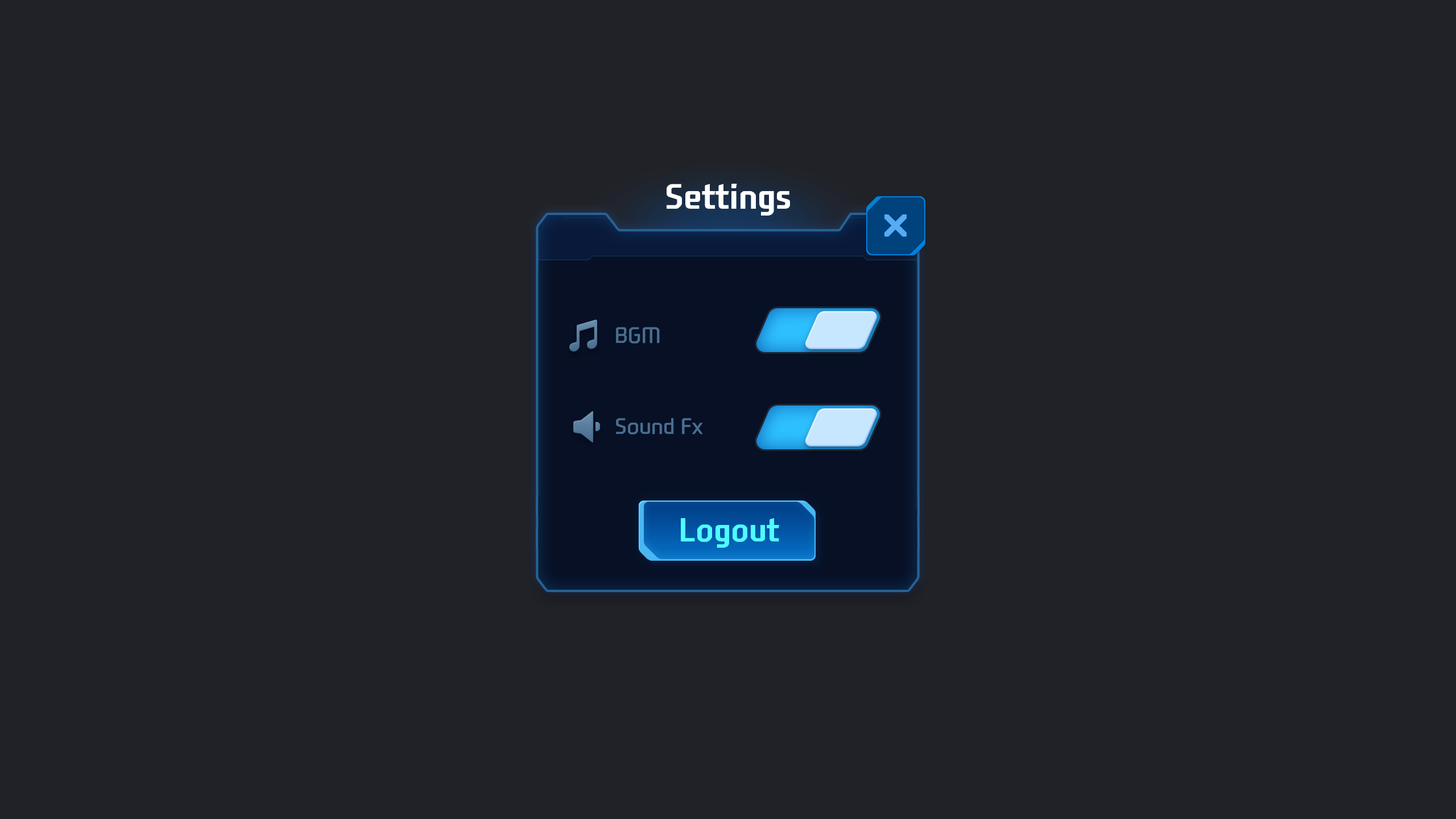
<style>
.page{position:relative;width:1456px;height:819px;background:#212227}
.page>*{position:absolute;margin:0}
.t1{font:34.1px "NEXONFootballGothicB";color:#ffffff}
.t2{font:21.8px "NEXONFootballGothicL";color:#496e91;text-transform:uppercase}
.t3{font:21.8px "NEXONFootballGothicL";color:#496e91}
.t4{font:32.1px "NEXONFootballGothicB";color:#4efefe}
</style>
<div class="page">
<p class="t1" style="left:667px;top:184px;width:123px;height:32px">Settings</p>
<p class="t2" style="left:616px;top:327px;width:44px;height:17px">BGM</p>
<p class="t3" style="left:616px;top:418px;width:87px;height:17px">Sound Fx</p>
<p class="t4" style="left:681px;top:518px;width:98px;height:30px">Logout</p>
</div>
